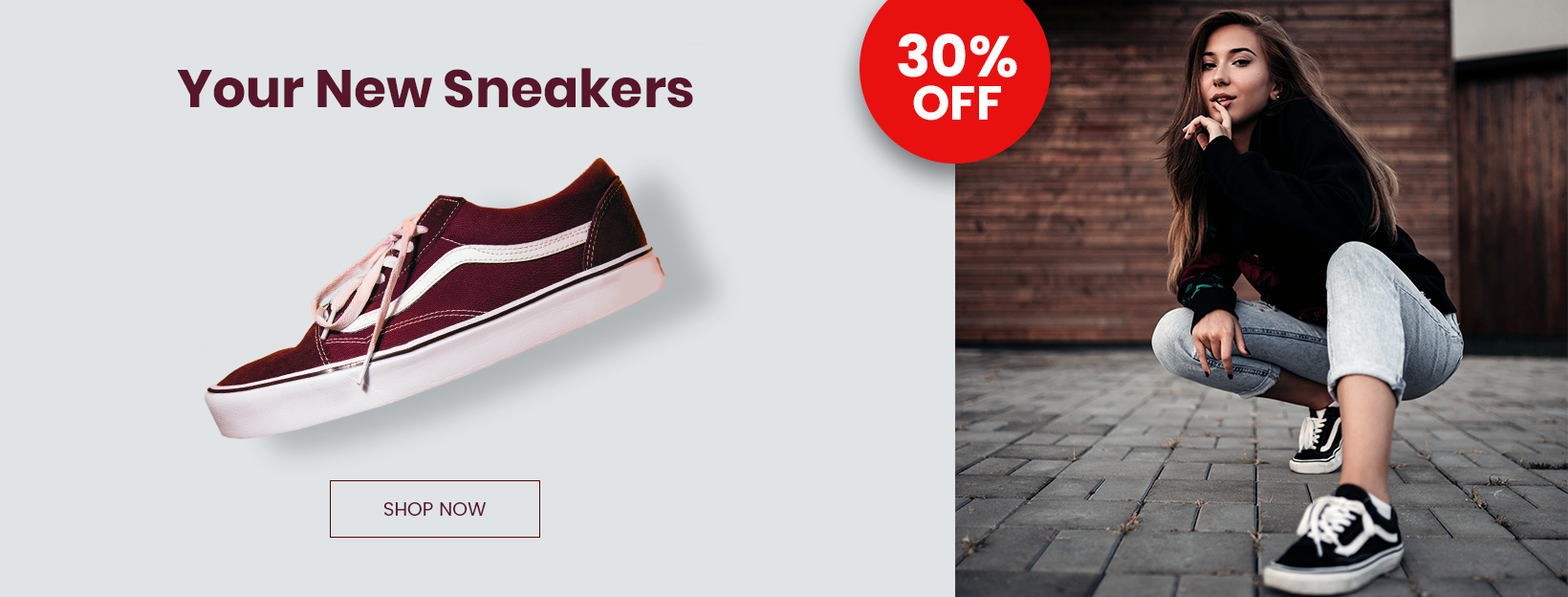
<style>
.page{position:relative;width:1568px;height:597px;background:#e0e4e7}
.page>*{position:absolute;margin:0}
.t1{font:57.4px "Poppins-Bold";color:#ffffff}
.t2{font:52.6px "Poppins-Bold";color:#57162a}
.t3{font:47.8px "Poppins-Bold";color:#ffffff;text-transform:uppercase}
.t4{font:19.1px "Poppins-Regular";color:#57162a}
</style>
<div class="page">
<p class="t1" style="left:898px;top:33px;width:119px;height:44px">30%</p>
<p class="t2" style="left:177px;top:68px;width:516px;height:40px">Your New Sneakers</p>
<p class="t3" style="left:913px;top:85px;width:88px;height:35px">off</p>
<p class="t4" style="left:383px;top:502px;width:104px;height:13px">SHOP NOW</p>
</div>
